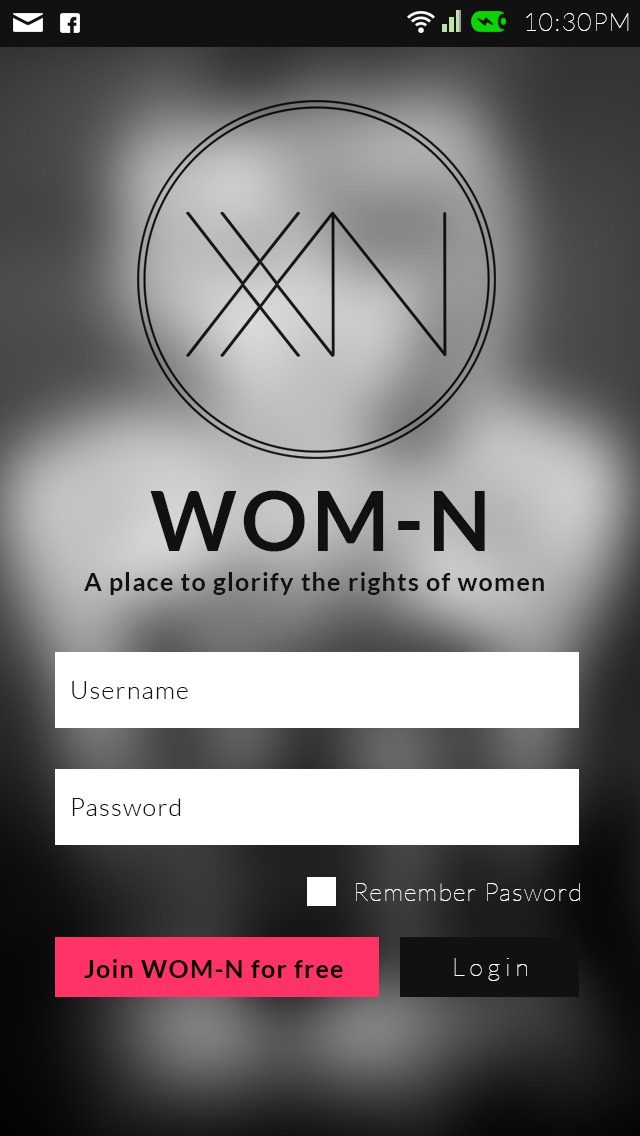
<style>
.page{position:relative;width:640px;height:1136px}
.page>*{position:absolute;margin:0}
.t1{font:25px "Lato-Hairline";letter-spacing:0.05em;color:#fefefe}
.t2{font:83.3px "Lato-Bold";letter-spacing:0.05em;color:#111111}
.t3{font:25px "Lato-Bold";letter-spacing:0.05em;color:#111111}
.t4{font:25px "Lato-Light";letter-spacing:0.05em;color:#111111}
.t5{font:25px "Lato-Bold";letter-spacing:0.05em;color:#000000}
.t6{font:25px "Lato-Hairline";letter-spacing:0.2em;color:#fdfdfd}
</style>
<div class="page">
<p class="t1" style="left:526px;top:13px;width:103px;height:18px">10:30PM</p>
<p class="t2" style="left:150px;top:490px;width:335px;height:62px">WOM-N</p>
<p class="t3" style="left:84px;top:572px;width:460px;height:23px">A place to glorify the rights of women</p>
<p class="t4" style="left:72px;top:681px;width:116px;height:18px">Username</p>
<p class="t4" style="left:72px;top:798px;width:109px;height:18px">Password</p>
<p class="t1" style="left:356px;top:883px;width:224px;height:18px">Remember Pasword</p>
<p class="t5" style="left:84px;top:959px;width:259px;height:19px">Join WOM-N for free</p>
<p class="t6" style="left:454px;top:958px;width:73px;height:23px">Login</p>
</div>
